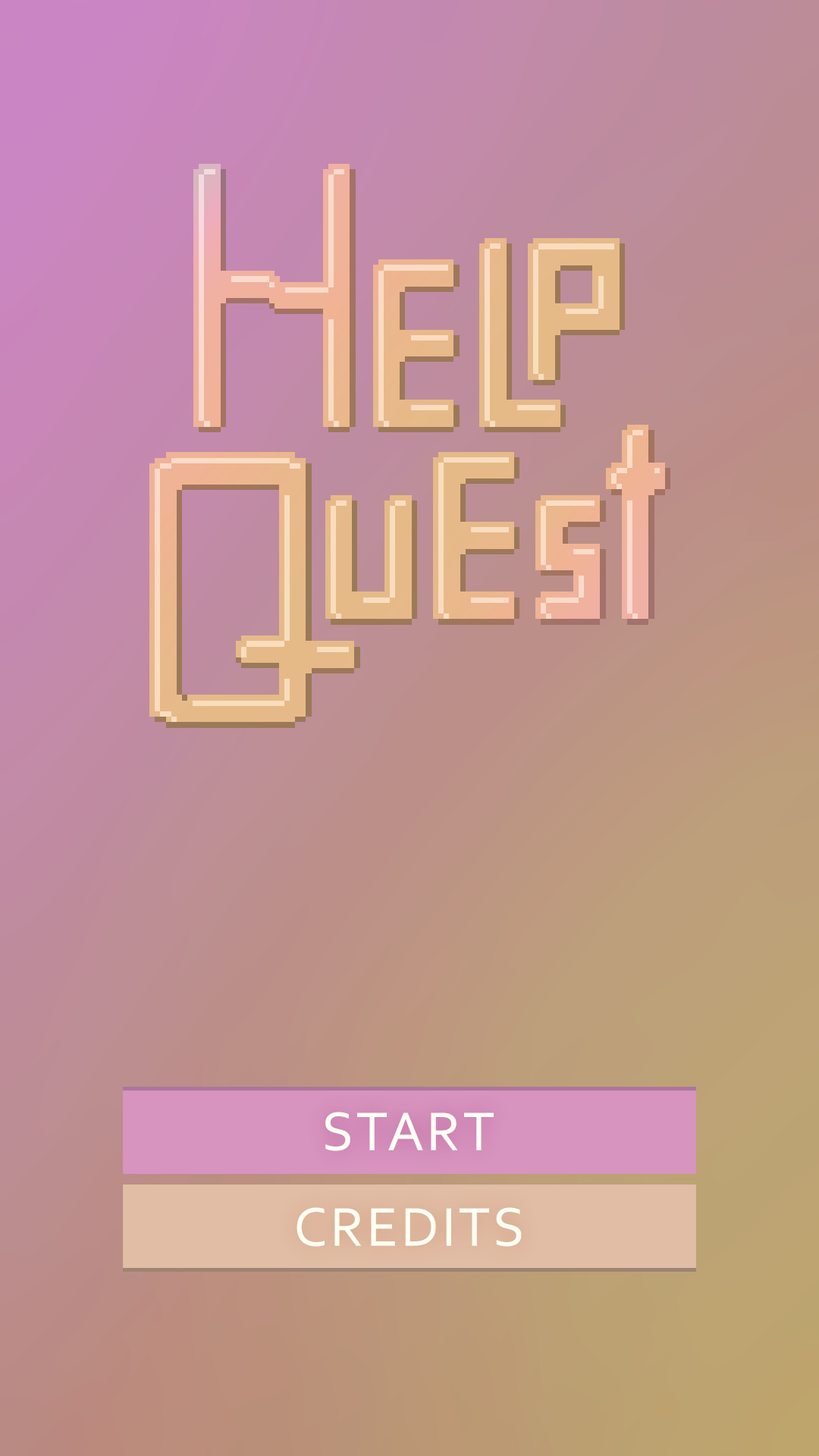
<style>
.page{position:relative;width:819px;height:1456px}
.page>*{position:absolute;margin:0}
.t1{font:56.9px "Corbel";letter-spacing:0.05em;color:#fefff4}
</style>
<div class="page">
<p class="t1" style="left:325px;top:1112px;width:169px;height:39px">START</p>
<p class="t1" style="left:297px;top:1207px;width:225px;height:40px">CREDITS</p>
</div>
